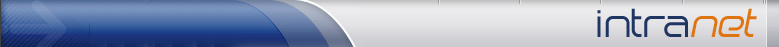
<style>
.page{position:relative;width:779px;height:47px}
.page>*{position:absolute;margin:0}
.t1{font:36px "Birdman";color:#1f3662}
.t2{font:36px "BirdmanOblique";color:#df7512}
</style>
<div class="page">
<p class="t1" style="left:597px;top:8px;width:160px;height:29px">intra<span class="t2">net</span></p>
</div>
